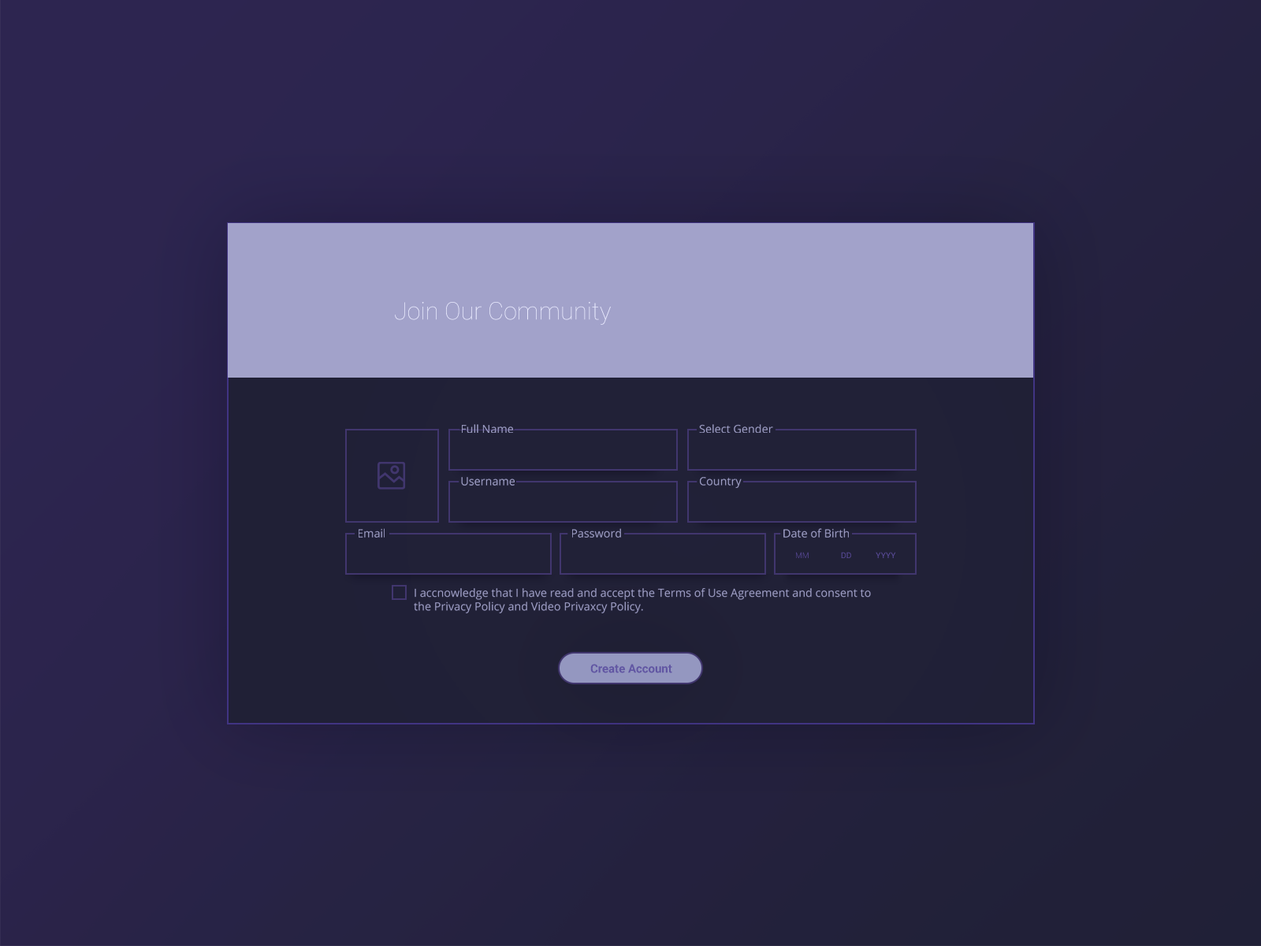
<style>
.page{position:relative;width:1261px;height:946px}
.page>*{position:absolute;margin:0}
.t1{font:24.2px "Roboto-Thin";color:#eaebff}
.t2{font:11.3px "OpenSans";color:#a2a2ca}
.t3{font:8.2px "Roboto-Light";color:#574894}
.t4{font:8.2px "Roboto-Regular";color:#574994}
.t5{font:11.8px "Roboto-Bold";color:#6156a3}
</style>
<div class="page">
<p class="t1" style="left:395px;top:302px;width:216px;height:23px">Join Our Community</p>
<p class="t2" style="left:462px;top:424px;width:51px;height:9px">Full Name</p>
<p class="t2" style="left:699px;top:424px;width:74px;height:9px">Select Gender</p>
<p class="t2" style="left:461px;top:477px;width:54px;height:8px">Username</p>
<p class="t2" style="left:700px;top:477px;width:42px;height:11px">Country</p>
<p class="t2" style="left:359px;top:528px;width:26px;height:9px">Email</p>
<p class="t2" style="left:572px;top:528px;width:49px;height:9px">Password</p>
<p class="t2" style="left:783px;top:528px;width:66px;height:9px">Date of Birth</p>
<p class="t3" style="left:796px;top:552px;width:13px;height:6px">MM</p>
<p class="t4" style="left:841px;top:552px;width:10px;height:6px">DD</p>
<p class="t4" style="left:876px;top:552px;width:20px;height:6px">YYYY</p>
<p class="t2" style="left:414px;top:588px;width:457px;height:25px">I accnowledge that I have read and accept the Terms of Use Agreement and consent to<br>the Privacy Policy and Video Privaxcy Policy.</p>
<p class="t5" style="left:590px;top:664px;width:82px;height:9px">Create Account</p>
</div>
